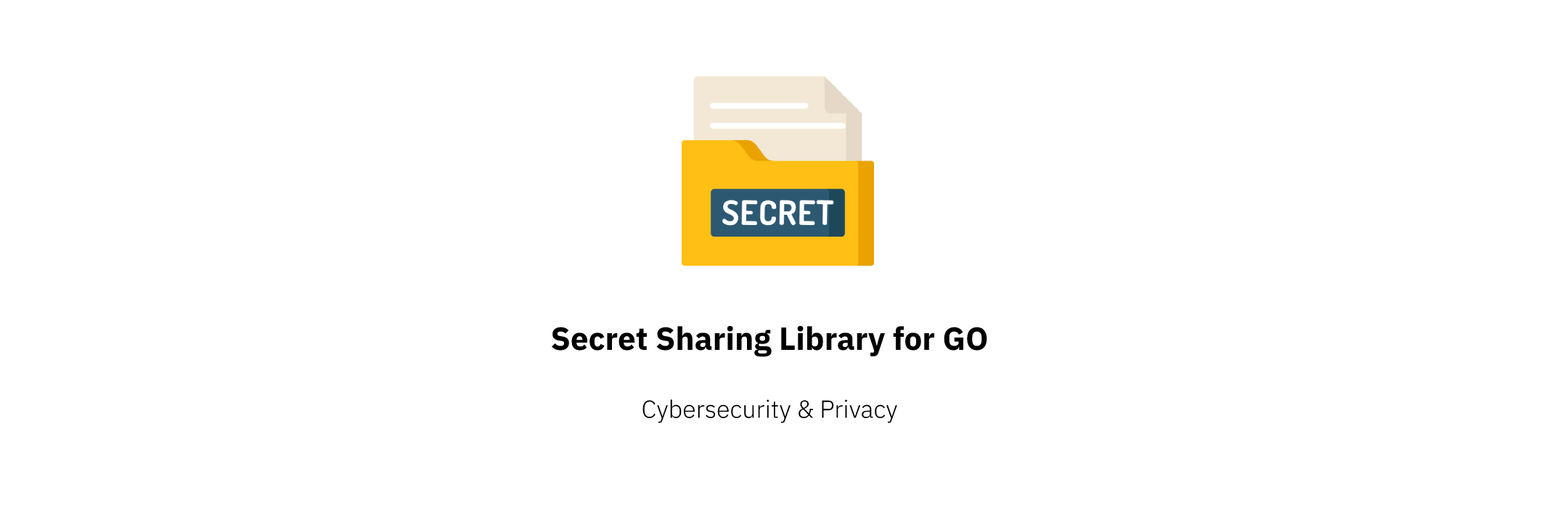
<style>
.page{position:relative;width:1568px;height:527px;background:#ffffff}
.page>*{position:absolute;margin:0}
.t1{font:31.9px "IBMPlexSans-Bold";color:#000000}
.t2{font:24.7px "IBMPlexSans-Light";color:#000000}
</style>
<div class="page">
<p class="t1" style="left:552px;top:326px;width:435px;height:97px;text-align:center">Secret Sharing Library for GO<br><br><span class="t2">Cybersecurity &amp; Privacy</span></p>
</div>
